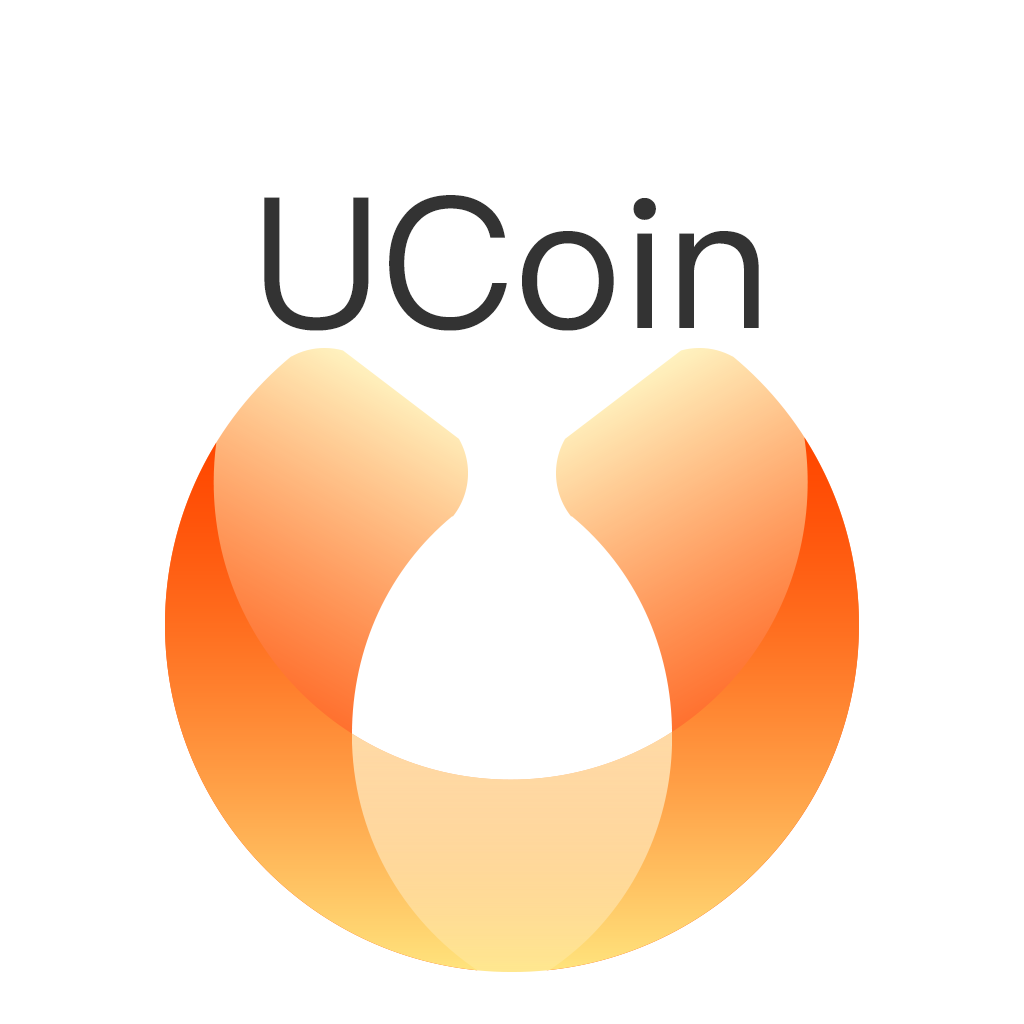
<style>
.page{position:relative;width:1024px;height:1024px;background:#ffffff}
.page>*{position:absolute;margin:0}
.t1{font:182.4px "PingFangSC-Regular";color:#333333}
</style>
<div class="page">
<p class="t1" style="left:264px;top:195px;width:495px;height:136px">UCoin</p>
</div>
